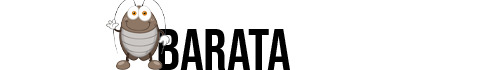
<style>
.page{position:relative;width:500px;height:70px;background:#ffffff}
.page>*{position:absolute;margin:0}
.t1{font:59px "BebasNeue-Regular";color:#000000}
</style>
<div class="page">
<p class="t1" style="left:158px;top:29px;width:132px;height:41px">Barata</p>
</div>
